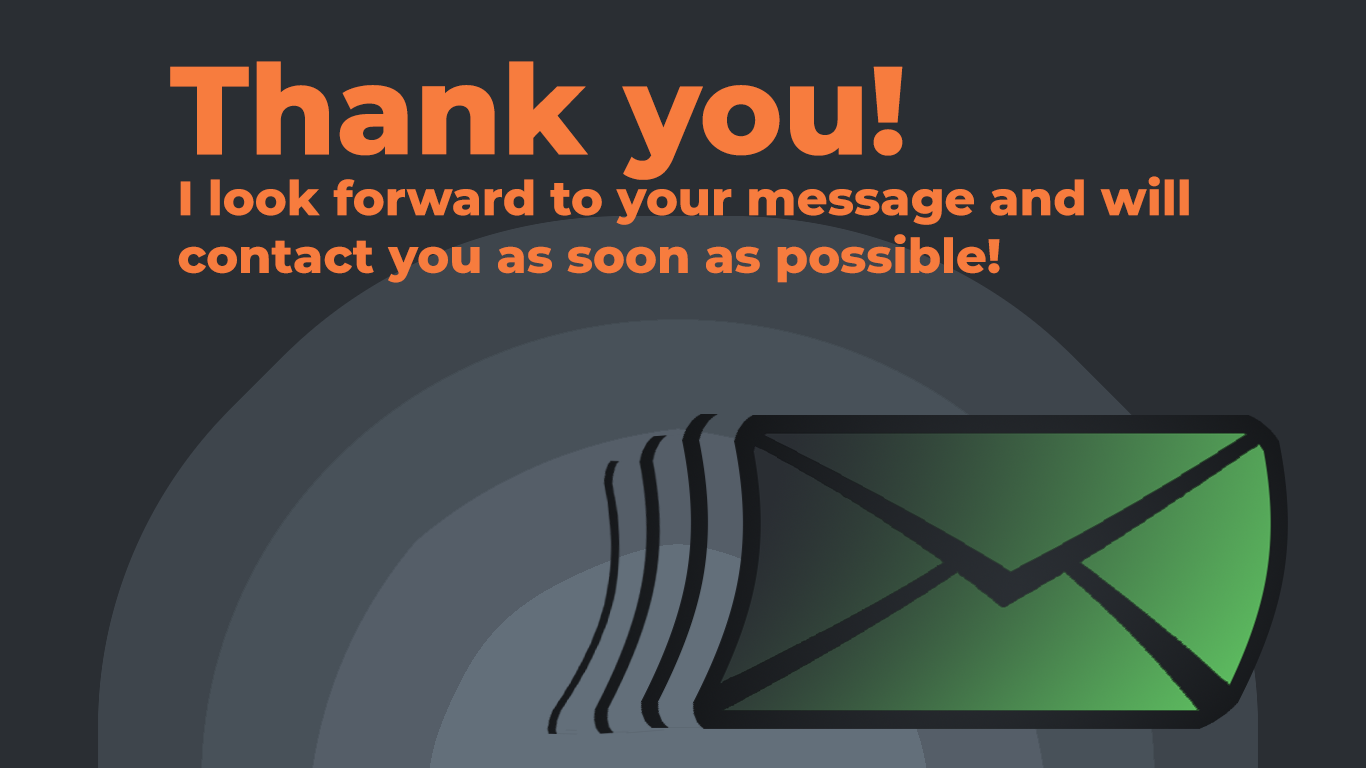
<style>
.page{position:relative;width:1366px;height:768px;background:#2a2e33}
.page>*{position:absolute;margin:0}
.t1{font:125px "Montserrat-ExtraBold";color:#f77c3e}
.t2{font:48px "Montserrat-ExtraBold";color:#f77c3e}
</style>
<div class="page">
<p class="t1" style="left:170px;top:61px;width:733px;height:119px">Thank you!</p>
<p class="t2" style="left:178px;top:176px;width:1011px;height:107px">I look forward to your message and will<br>contact you as soon as possible!</p>
</div>
